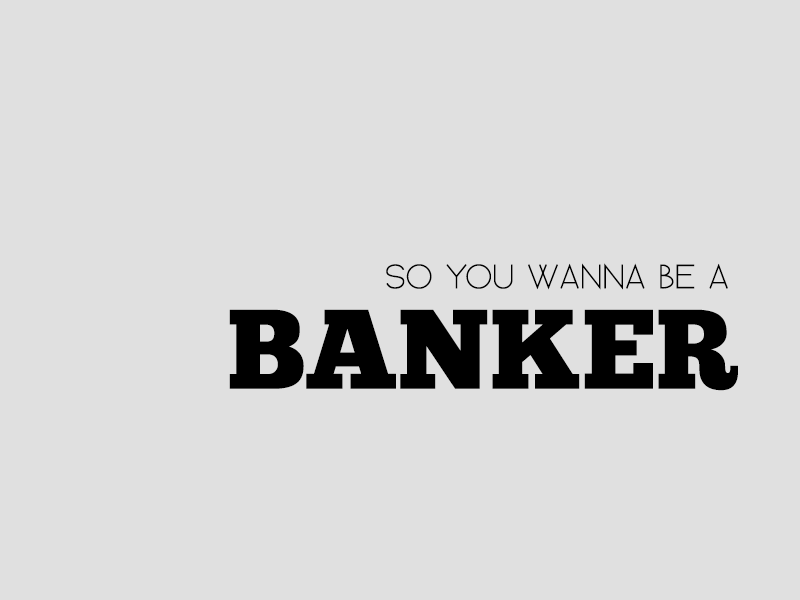
<style>
.page{position:relative;width:800px;height:600px;background:#e0e0e0}
.page>*{position:absolute;margin:0}
.t1{font:44px "Existence-UnicaseLight";letter-spacing:-0.04em;color:#000000}
.t2{font:113px "ChunkFive-Roman";color:#000000}
</style>
<div class="page">
<p class="t1" style="left:386px;top:263px;width:342px;height:27px">So You WANNA BE A</p>
<p class="t2" style="left:229px;top:309px;width:509px;height:82px">BANKER</p>
</div>
